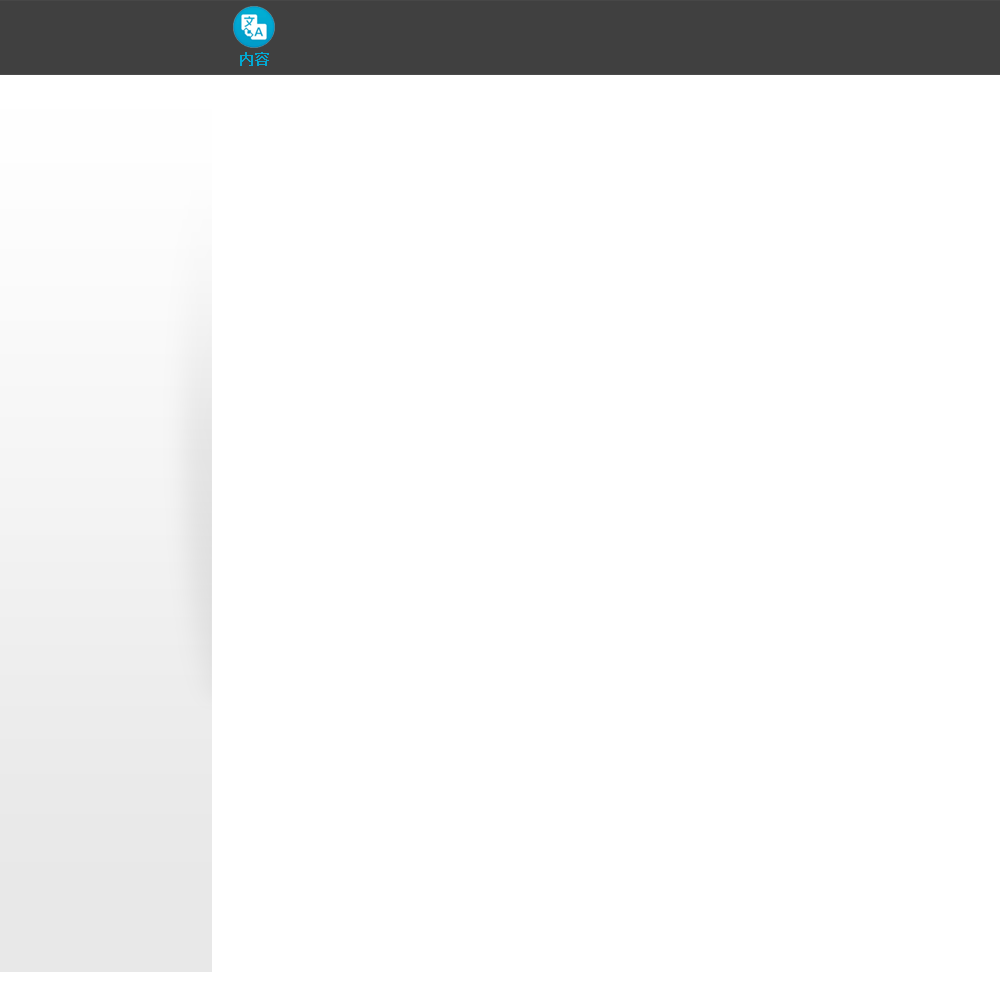
<style>
.page{position:relative;width:1000px;height:1000px;background:#ffffff}
.page>*{position:absolute;margin:0}
.t1{font:14px "NSimSun";letter-spacing:0.075em;color:#02a9d3;font-weight:bold}
</style>
<div class="page">
<p class="t1" style="left:240px;top:52px;width:29px;height:14px">内容</p>
</div>
